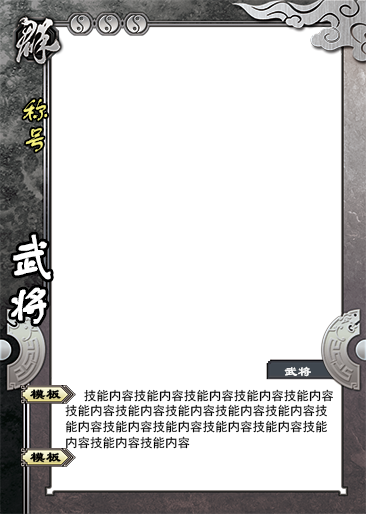
<style>
.page{position:relative;width:366px;height:514px;background:#ffffff}
.page>*{position:absolute;margin:0}
.t1{font:29.2px "FZSTK--GBK1-0";color:#f6f17d}
.t2{font:50px "FZSTK--GBK1-0";color:#ffffff;font-weight:bold}
.t3{font:13.8px "LiSu";color:#ffffff}
.t4{font:15px "LiSu";color:#000000;font-weight:bold}
.t5{font:12.5px/15.8px "SimHei";color:#000000}
</style>
<div class="page">
<p class="t1" style="left:23px;top:99px;width:25px;height:53px">称号</p>
<p class="t2" style="left:11px;top:234px;width:40px;height:90px">武将</p>
<p class="t3" style="left:284px;top:366px;width:27px;height:11px">武将</p>
<p class="t4" style="left:30px;top:389px;width:31px;height:11px">模板</p>
<p class="t5" style="left:65px;top:389px;width:268px;height:60px">技能内容技能内容技能内容技能内容技能内容技能内容技能内容技能内容技能内容技能内容技能内容技能内容技能内容技能内容技能内容技能内容技能内容技能内容</p>
<p class="t4" style="left:30px;top:452px;width:31px;height:11px">模板</p>
</div>
